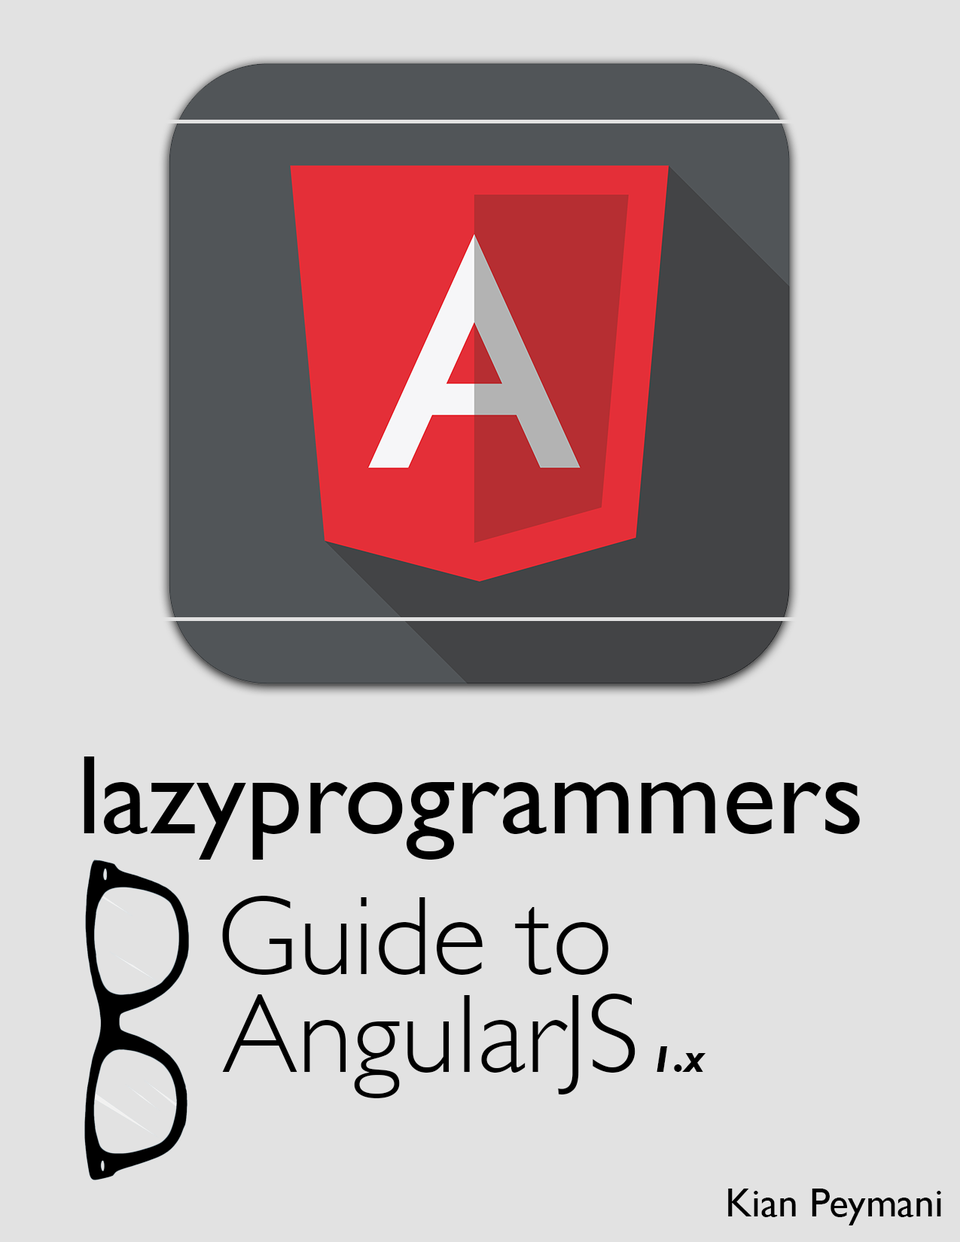
<style>
.page{position:relative;width:960px;height:1242px;background:#e2e2e2}
.page>*{position:absolute;margin:0}
.t1{font:112.9px "GillSans";color:#000000}
.t2{font:112.9px "GillSans-Light";color:#000000}
.t3{font:37.6px "GillSans-BoldItalic";color:#000000}
.t4{font:40.6px "GillSans";color:#000000}
</style>
<div class="page">
<p class="t1" style="left:84px;top:757px;width:776px;height:103px">lazyprogrammers</p>
<p class="t2" style="left:222px;top:896px;width:386px;height:79px">Guide to</p>
<p class="t2" style="left:222px;top:994px;width:413px;height:104px">AngularJS</p>
<p class="t3" style="left:657px;top:1046px;width:49px;height:26px">1.x</p>
<p class="t4" style="left:728px;top:1189px;width:213px;height:37px">Kian Peymani</p>
</div>
